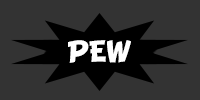
<style>
.page{position:relative;width:200px;height:100px;background:#333333}
.page>*{position:absolute;margin:0}
.t1{font:24px "BDCartoonShout";color:#ffffff}
</style>
<div class="page">
<p class="t1" style="left:68px;top:40px;width:63px;height:23px">PEW</p>
</div>
